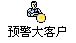
<style>
.page{position:relative;width:76px;height:43px;background:#ffffff}
.page>*{position:absolute;margin:0}
.t1{font:12px "SimSun";color:#000000}
</style>
<div class="page">
<p class="t1" style="left:8px;top:26px;width:58px;height:11px">预警大客户</p>
</div>
